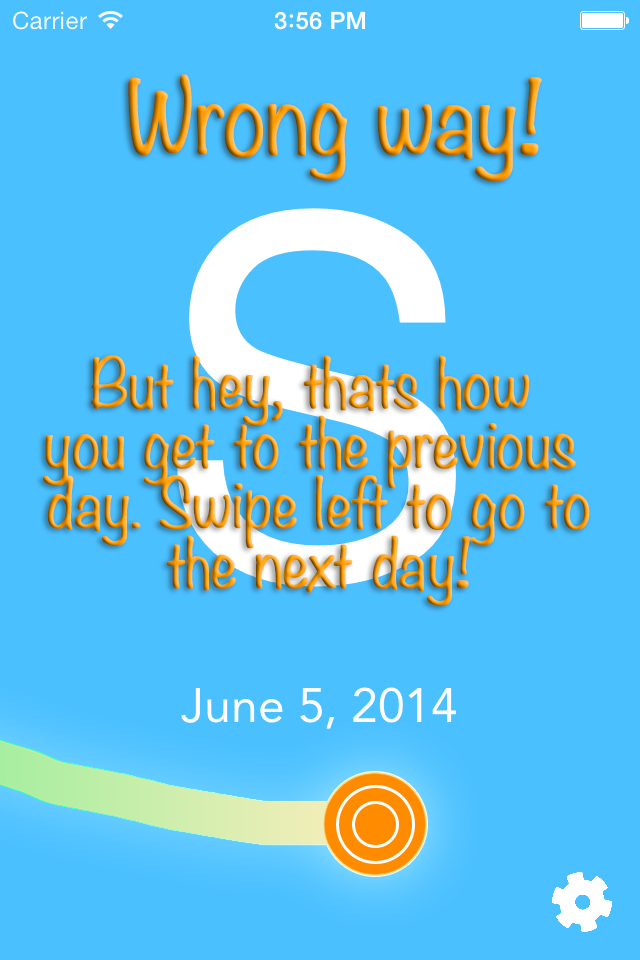
<style>
.page{position:relative;width:640px;height:960px;background:#4bc0ff}
.page>*{position:absolute;margin:0}
.t1{font:90px "Noteworthy-Light";letter-spacing:-0.01em;font-weight:bold}
.t2{font:60px/60px "Noteworthy-Light";letter-spacing:-0.01em;font-weight:bold}
</style>
<div class="page">
<p class="t1" style="left:128px;top:74px;width:414px;height:108px">Wrong way!</p>
<p class="t2" style="left:43px;top:355px;width:547px;height:251px;text-align:center">But hey, thats how <br>you get to the previous <br>day. Swipe left to go to<br>the next day!</p>
</div>
